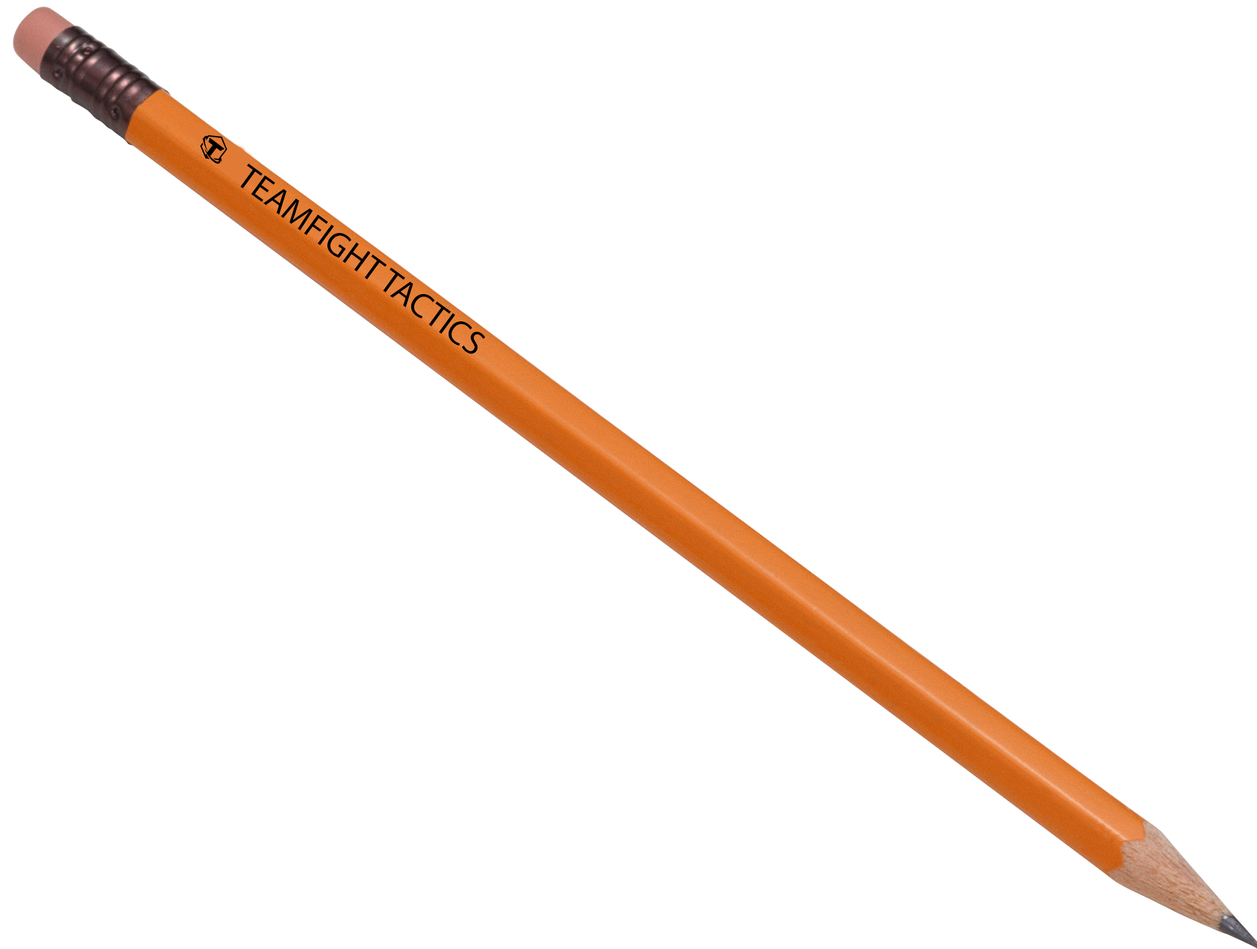
<style>
.page{position:relative;width:1257px;height:949px;background:#ffffff}
.page>*{position:absolute;margin:0}
.t1{font:34.7px "MyriadPro-Regular";color:#000000}
</style>
<div class="page">
<p class="t1" style="left:240px;top:163px;width:245px;height:191px;rotate:36deg">TEAMFIGHT TACTICS</p>
</div>
